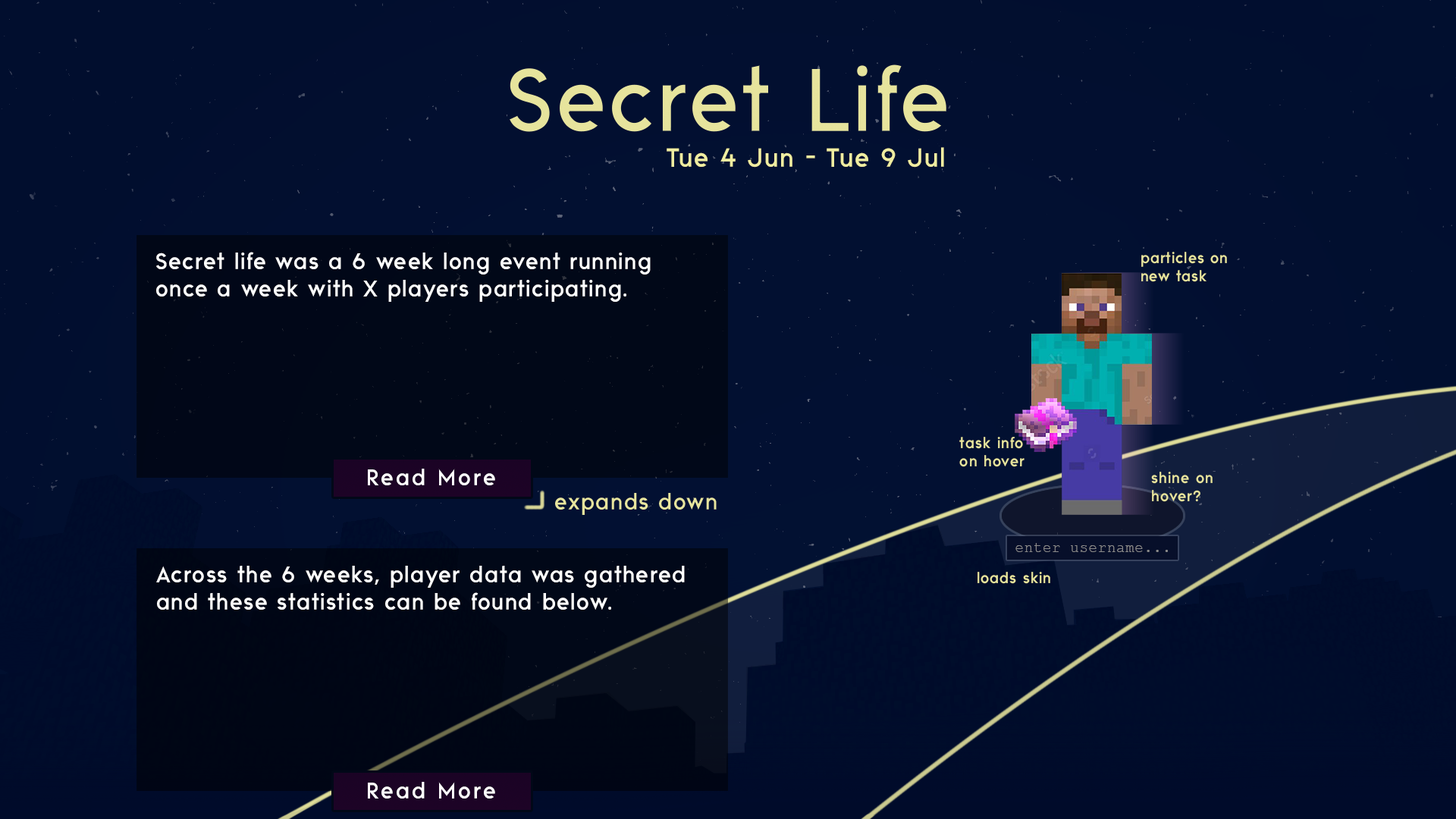
<style>
.page{position:relative;width:1456px;height:819px}
.page>*{position:absolute;margin:0}
.t1{font:26.2px "ReoSansMedium";letter-spacing:0.05em;color:#f0eda1}
.t2{font:22.7px "ReoSansMedium";letter-spacing:0.05em;color:#ffffff}
.t3{font:15.2px "ReoSansMedium";letter-spacing:0.05em;color:#e7e49d}
.t4{font:22.7px "ReoSansMedium";letter-spacing:0.1em;color:#ffffff}
.t5{font:14.2px "CourierNewPSMT";letter-spacing:0.05em;color:#8b8b8b}
</style>
<div class="page">
<p class="t1" style="left:667px;top:147px;width:277px;height:21px">Tue 4 Jun - Tue 9 Jul</p>
<p class="t2" style="left:156px;top:252px;width:495px;height:50px">Secret life was a 6 week long event running<br>once a week with X players participating.</p>
<p class="t3" style="left:1141px;top:252px;width:86px;height:30px">particles on<br>new task</p>
<p class="t3" style="left:959px;top:437px;width:65px;height:30px">task info<br>on hover</p>
<p class="t4" style="left:368px;top:469px;width:127px;height:16px">Read More</p>
<p class="t3" style="left:1151px;top:472px;width:62px;height:30px">shine on<br>hover?</p>
<p class="t5" style="left:1015px;top:543px;width:153px;height:9px">enter username...</p>
<p class="t2" style="left:156px;top:566px;width:529px;height:44px">Across the 6 weeks, player data was gathered<br>and these statistics can be found below.</p>
<p class="t3" style="left:977px;top:572px;width:73px;height:12px">loads skin</p>
<p class="t4" style="left:368px;top:782px;width:127px;height:17px">Read More</p>
</div>
